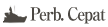
<style>
.page{position:relative;width:108px;height:27px;background:#ffffff}
.page>*{position:absolute;margin:0}
.t1{font:18px "RyuminPro-ExBold";letter-spacing:-0.08em;color:#4c4843;scale:0.9 1}
</style>
<div class="page">
<p class="t1" style="left:30px;top:7px;width:76px;height:17px">Perb. Cepat</p>
</div>
